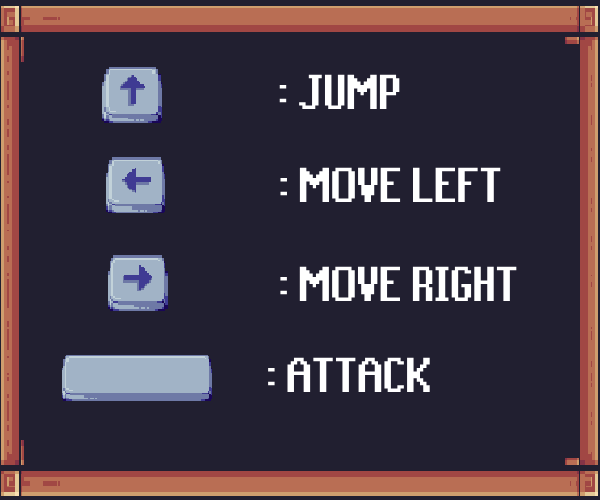
<style>
.page{position:relative;width:600px;height:500px;background:#211f30}
.page>*{position:absolute;margin:0}
.t1{font:54.8px "RuneScape-UF";color:#ffffff;scale:0.94 1}
</style>
<div class="page">
<p class="t1" style="left:279px;top:74px;width:121px;height:35px">: JUMP</p>
<p class="t1" style="left:280px;top:167px;width:221px;height:35px">: MOVE LEFT</p>
<p class="t1" style="left:280px;top:266px;width:237px;height:35px">: MOVE RIGHT</p>
<p class="t1" style="left:268px;top:357px;width:162px;height:35px">: ATTACK</p>
</div>
